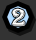
<style>
.page{position:relative;width:36px;height:40px;background:#333333}
.page>*{position:absolute;margin:0}
.t1{font:24.7px "Algerian";color:#ffffff}
</style>
<div class="page">
<p class="t1" style="left:12px;top:8px;width:13px;height:18px">2</p>
</div>
